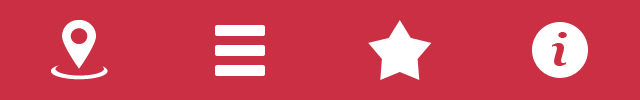
<style>
.page{position:relative;width:640px;height:100px;background:#ca2f44}
.page>*{position:absolute;margin:0}
.t1{font:44px "Georgia-BoldItalic";color:#ca2f44}
</style>
<div class="page">
<p class="t1" style="left:551px;top:32px;width:16px;height:34px">i</p>
</div>
